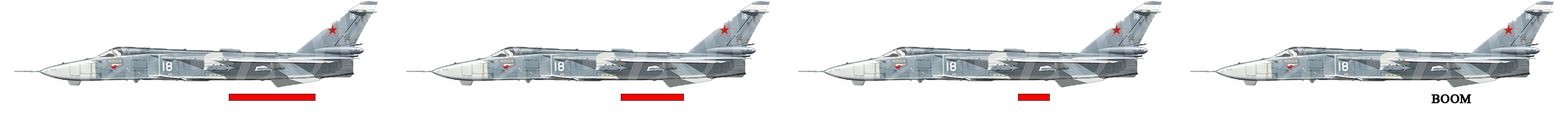
<style>
.page{position:relative;width:1568px;height:131px;background:#ffffff}
.page>*{position:absolute;margin:0}
.t1{font:19.1px "AngsanaNew";color:#000000;text-transform:uppercase;font-weight:bold}
</style>
<div class="page">
<p class="t1" style="left:1431px;top:94px;width:40px;height:9px">BOOM</p>
</div>
